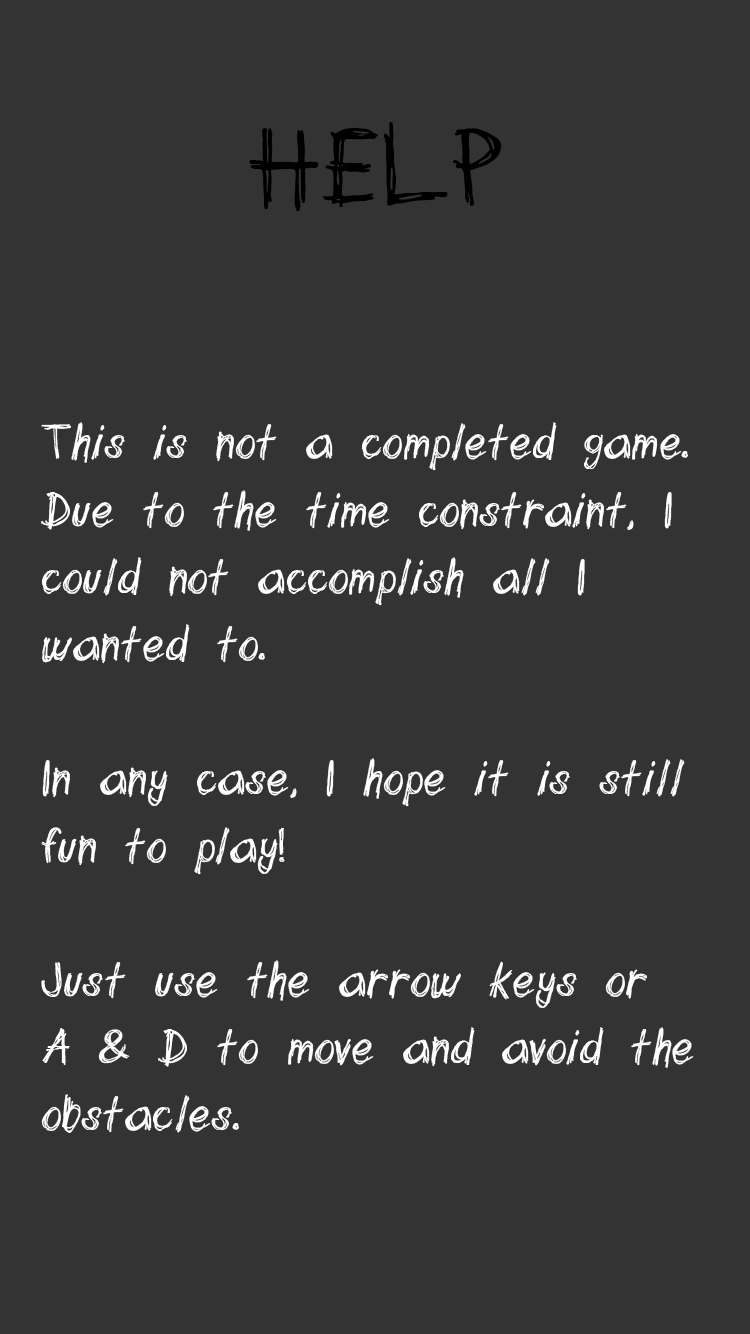
<style>
.page{position:relative;width:750px;height:1334px;background:#333333}
.page>*{position:absolute;margin:0}
.t1{font:124px "scribblett";color:#000000}
.t2{font:56px "scribblett";color:#ffffff}
</style>
<div class="page">
<p class="t1" style="left:249px;top:122px;width:253px;height:90px">HELP</p>
<p class="t2" style="left:41px;top:422px;width:653px;height:711px">This is not a completed game. <br>Due to the time constraint, I <br>could not accomplish all I <br>wanted to.<br><br>In any case, I hope it is still<br>fun to play!<br><br>Just use the arrow keys or<br>A &amp; D to move and avoid the<br>obstacles.</p>
</div>
